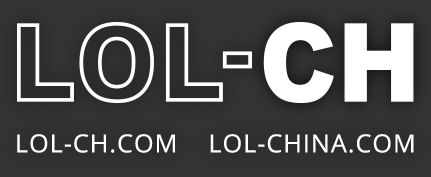
<style>
.page{position:relative;width:431px;height:177px;background:#333333}
.page>*{position:absolute;margin:0}
.t1{font:24.9px "OpenSans";letter-spacing:0.04em;color:#ffffff}
</style>
<div class="page">
<p class="t1" style="left:17px;top:134px;width:397px;height:19px">LOL-CH.COM    LOL-CHINA.COM</p>
</div>
